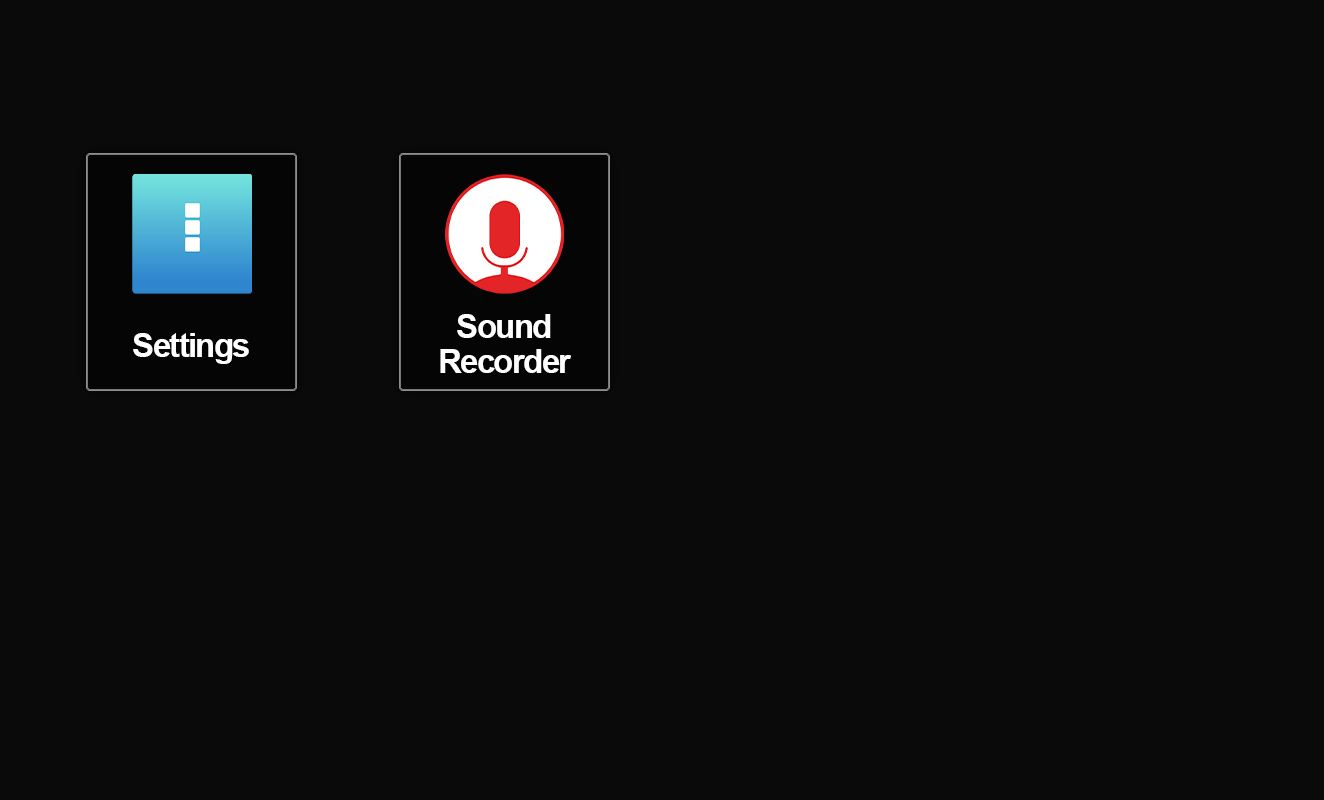
<style>
.page{position:relative;width:1324px;height:800px;background:#0a0a0a}
.page>*{position:absolute;margin:0}
.t1{font:33px/35px "Arial-BoldMT";letter-spacing:-0.05em;color:#ffffff}
.t2{font:33px "Arial-BoldMT";letter-spacing:-0.05em;color:#ffffff}
</style>
<div class="page">
<p class="t1" style="left:440px;top:314px;width:131px;height:59px;text-align:center">Sound <br>Recorder</p>
<p class="t2" style="left:133px;top:333px;width:116px;height:31px">Settings</p>
</div>
